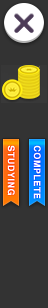
<style>
.page{position:relative;width:48px;height:308px;background:#333333}
.page>*{position:absolute;margin:0}
.t1{font:9px "Helvetica-Bold";letter-spacing:0.05em;color:#ffffff;font-weight:bold}
</style>
<div class="page">
<p class="t1" style="left:7px;top:145px;width:8px;height:50px;rotate:90deg">STUDYING</p>
<p class="t1" style="left:33px;top:145px;width:8px;height:54px;rotate:90deg">COMPLETE</p>
</div>
